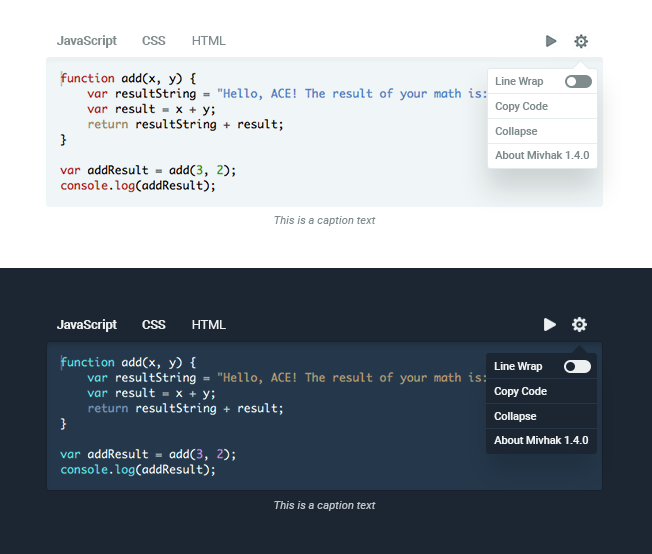
<style>
.page{position:relative;width:652px;height:554px;background:#1b2632}
.page>*{position:absolute;margin:0}
.t1{font:12.5px "Roboto-Bold";color:#7f8c8d}
.t2{font:12.5px "Roboto-Regular";color:#7f8c8d}
.t3{font:10.8px "Roboto-Medium";color:#7f8c8d}
.t4{font:11.2px "Roboto-Italic";color:#7f8c8d}
.t5{font:12.5px "Roboto-Bold";color:#ecf0f1}
.t6{font:12.5px "Roboto-Regular";color:#ecf0f1}
.t7{font:10.8px "Roboto-Medium";color:#ecf0f1}
.t8{font:11.2px "Roboto-Italic";color:#bdc3c7}
</style>
<div class="page">
<p class="t1" style="left:57px;top:35px;width:60px;height:13px">JavaScript</p>
<p class="t1" style="left:142px;top:36px;width:24px;height:9px">CSS</p>
<p class="t2" style="left:192px;top:36px;width:34px;height:9px">HTML</p>
<p class="t3" style="left:495px;top:77px;width:49px;height:10px">Line Wrap</p>
<p class="t3" style="left:495px;top:102px;width:53px;height:10px">Copy Code</p>
<p class="t3" style="left:495px;top:127px;width:43px;height:10px">Collapse</p>
<p class="t3" style="left:495px;top:151px;width:95px;height:8px">About Mivhak 1.4.0</p>
<p class="t4" style="left:274px;top:216px;width:102px;height:10px">This is a caption text</p>
<p class="t5" style="left:57px;top:319px;width:60px;height:13px">JavaScript</p>
<p class="t5" style="left:142px;top:320px;width:24px;height:9px">CSS</p>
<p class="t6" style="left:192px;top:320px;width:34px;height:9px">HTML</p>
<p class="t7" style="left:494px;top:362px;width:49px;height:10px">Line Wrap</p>
<p class="t7" style="left:494px;top:387px;width:53px;height:10px">Copy Code</p>
<p class="t7" style="left:494px;top:412px;width:43px;height:10px">Collapse</p>
<p class="t7" style="left:494px;top:436px;width:95px;height:8px">About Mivhak 1.4.0</p>
<p class="t8" style="left:274px;top:501px;width:102px;height:10px">This is a caption text</p>
</div>
